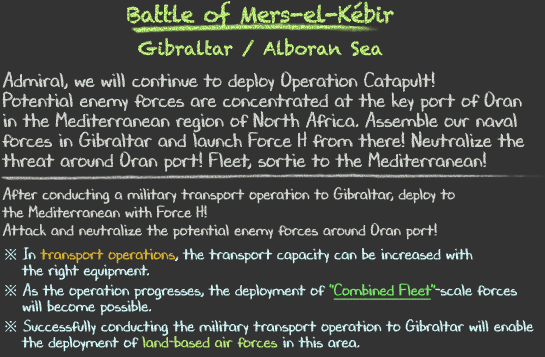
<style>
.page{position:relative;width:545px;height:357px;background:#333333}
.page>*{position:absolute;margin:0}
.t1{font:22px/36px "Chalkduster";letter-spacing:-0.04em;color:#bcec77}
.t2{font:18px/36px "Chalkduster";color:#bcec77}
.t3{font:20px/20px "DJBChalkItUp";color:#d9ded6}
.t4{font:16px/18px "DJBChalkItUp";color:#d9ded6}
.t5{font:16px/24px "DJBChalkItUp";color:#d9ded6}
.t6{font:16px/16px "TimesNewRomanPSMT";color:#d7feff}
.t7{font:16px/16px "DJBChalkItUp";color:#d7feff}
.t8{font:16px/16px "DJBChalkItUp";color:#dfb731}
.t9{font:16px/18px "DJBChalkItUp";color:#d7feff}
.t10{font:16px/20px "DJBChalkItUp";color:#d7feff}
.t11{font:16px/16px "DJBChalkItUp";color:#7bf26b}
.t12{font:16px/16px "DJBChalkItUp";color:#7bf26b;text-decoration:underline}
.t13{font:16px/16px "DJBChalkItUp";color:#bdef78}
</style>
<div class="page">
<p class="t1" style="left:127px;top:1px;width:267px;height:56px;text-align:center">Battle of Mers-el-Kébir<br><span class="t2">Gibraltar / Alboran Sea</span></p>
<p class="t3" style="left:1px;top:71px;width:533px;height:281px">Admiral, we will continue to deploy Operation Catapult!<br>Potential enemy forces are concentrated at the key port of Oran<br>in the Mediterranean region of North Africa. Assemble our naval<br>forces in Gibraltar and launch Force H from there! Neutralize the<br>threat around Oran port! Fleet, sortie to the Mediterranean!<br><br><span class="t4">After conducting a military transport operation to Gibraltar, deploy to<br>the Mediterranean with Force H!<br>Attack and neutralize the potential enemy forces around Oran port</span><span class="t5">!<br></span><span class="t6">※ </span><span class="t7">In </span><span class="t8">transport operations</span><span class="t7">, the transport capacity can be increased with<br>　 </span><span class="t9">the right equipment</span><span class="t10">.<br></span><span class="t6">※ </span><span class="t7">As the operation progresses, the deployment of </span><span class="t11">"</span><span class="t12">Combined Fleet</span><span class="t11">"</span><span class="t7">-scale forces<br>　 will become possible</span><span class="t10">.<br></span><span class="t6">※</span><span class="t7"> Successfully conducting the military transport operation to Gibraltar will enable<br>　 the deployment of </span><span class="t13">land-based air forces</span><span class="t7"> in this area.</span></p>
</div>
